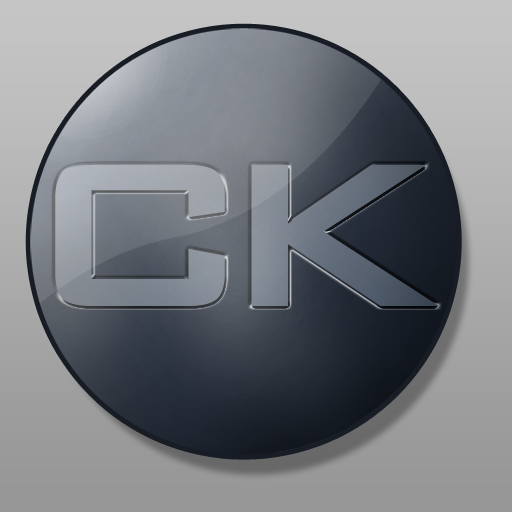
<style>
.page{position:relative;width:512px;height:512px}
.page>*{position:absolute;margin:0}
.t1{font:272.8px "BankGothicBT-Medium";letter-spacing:-0.16em;scale:1.1 1}
</style>
<div class="page">
<p class="t1" style="left:55px;top:164px;width:384px;height:142px">CK</p>
</div>
